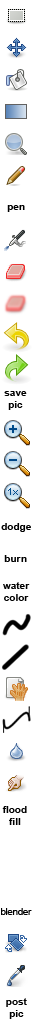
<style>
.page{position:relative;width:32px;height:1024px;background:#ffffff}
.page>*{position:absolute;margin:0}
.t1{font:10px "Arial-BoldMT";color:#000000}
.t2{font:10px "ArialMT";letter-spacing:-0.04em;color:#000000}
</style>
<div class="page">
<p class="t1" style="left:7px;top:205px;width:18px;height:7px">pen</p>
<p class="t1" style="left:4px;top:391px;width:23px;height:19px;text-align:center">save<br>pic</p>
<p class="t1" style="left:1px;top:523px;width:30px;height:9px">dodge</p>
<p class="t1" style="left:4px;top:555px;width:23px;height:7px">burn</p>
<p class="t1" style="left:3px;top:582px;width:27px;height:19px;text-align:center">water<br>color</p>
<p class="t1" style="left:2px;top:806px;width:25px;height:19px;text-align:center">flood<br>fill</p>
<p class="t2" style="left:1px;top:908px;width:31px;height:7px">blender</p>
<p class="t1" style="left:6px;top:998px;width:21px;height:21px;text-align:center">post<br>pic</p>
</div>
